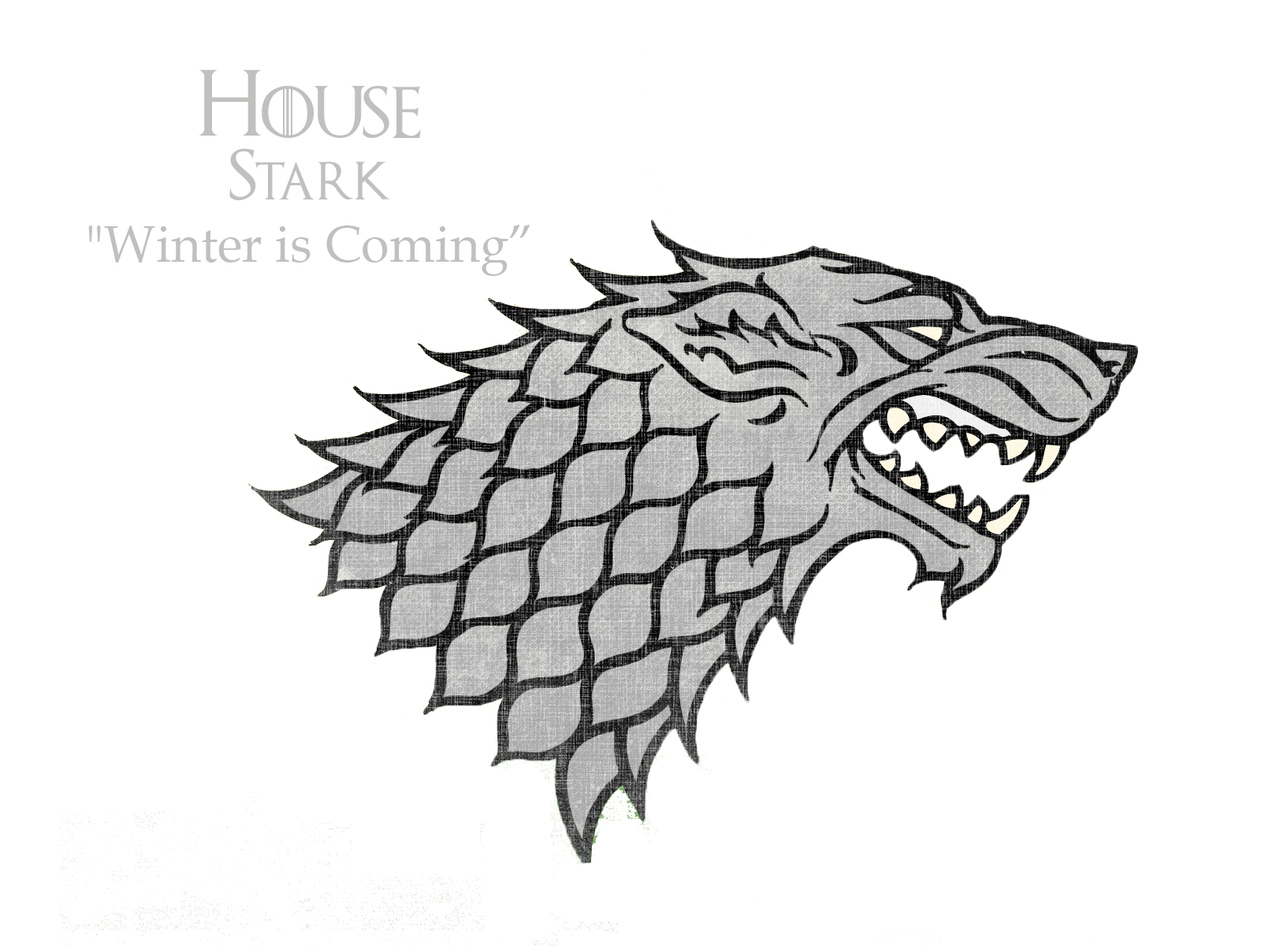
<style>
.page{position:relative;width:1261px;height:946px;background:#ffffff}
.page>*{position:absolute;margin:0}
.t1{font:51.4px "BookAntiqua";color:#c0c0bf}
.t2{font:65.7px "GameofThrones";color:#c0c0bf;font-variant:small-caps}
.t3{font:74.4px "GameofThrones";color:#c0c0bf;font-variant:small-caps}
.t4{font:51.4px "GameofThrones";color:#c0c0bf;font-variant:small-caps}
.t5{font:53.6px "GameofThrones";color:#c0c0bf;font-variant:small-caps}
</style>
<div class="page">
<p class="t1" style="left:88px;top:69px;width:442px;height:207px;text-align:center"><span class="t2">H</span><span class="t3">ouse<br></span><span class="t4">S</span><span class="t5">tark<br></span>"Winter is Coming”</p>
</div>
